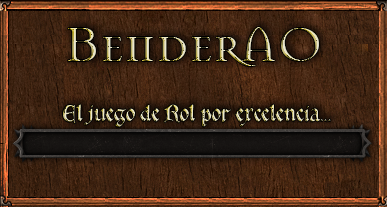
<style>
.page{position:relative;width:387px;height:207px}
.page>*{position:absolute;margin:0}
.t1{font:52.5px "Mason-Regular"}
.t2{font:22.4px "GoticaBastard"}
</style>
<div class="page">
<p class="t1" style="left:68px;top:27px;width:251px;height:39px">BenderAO</p>
<p class="t2" style="left:63px;top:104px;width:268px;height:23px">El juego de Rol por excelencia...</p>
</div>
